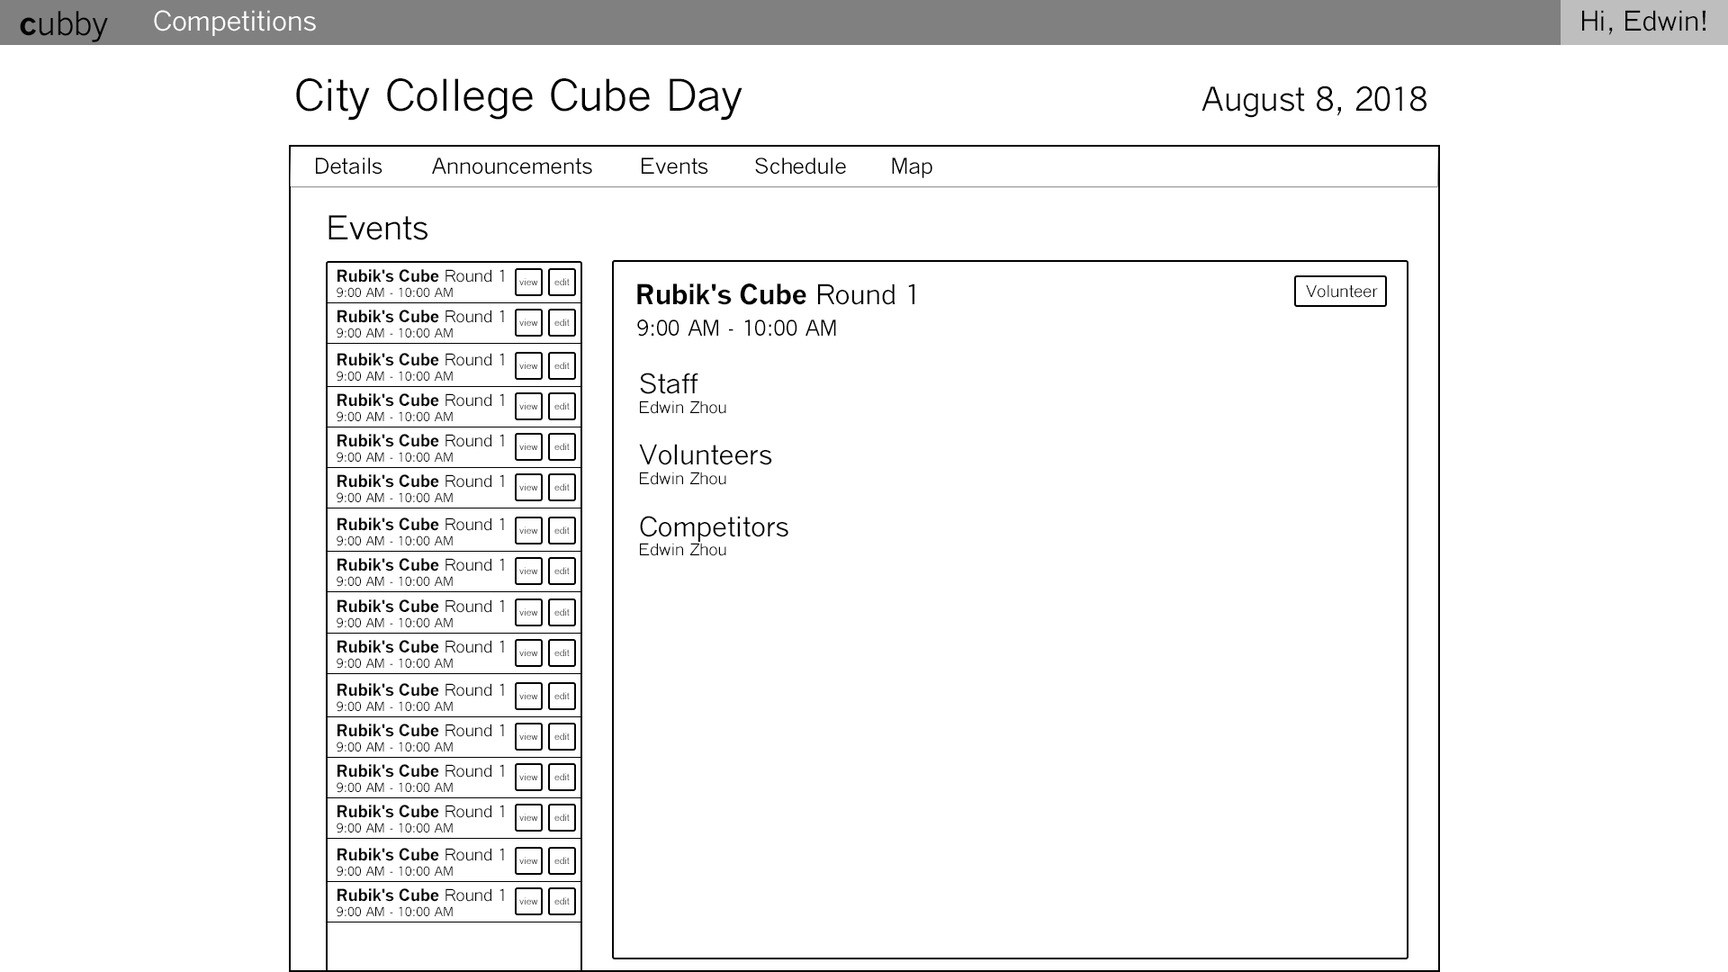
<style>
.page{position:relative;width:1728px;height:972px;background:#ffffff}
.page>*{position:absolute;margin:0}
.t1{font:32.4px "QuickTypeII";color:#000000}
.t2{font:32.4px "QuickTypeII-Bold";color:#000000}
.t3{font:27px "QuickTypeII";color:#ffffff}
.t4{font:27px "QuickTypeII";color:#000000}
.t5{font:43.2px "QuickTypeII";color:#000000}
.t6{font:21.6px "QuickTypeII";color:#000000}
.t7{font:12.6px "QuickTypeII";color:#000000}
.t8{font:16.2px "QuickTypeII-Bold";color:#000000}
.t9{font:16.2px "QuickTypeII";color:#000000}
.t10{font:9px "QuickTypeII"}
.t11{font:27px "QuickTypeII-Bold";color:#000000}
</style>
<div class="page">
<p class="t1" style="left:20px;top:11px;width:88px;height:31px"><span class="t2">c</span>ubby</p>
<p class="t3" style="left:154px;top:10px;width:162px;height:26px">Competitions</p>
<p class="t4" style="left:1582px;top:10px;width:124px;height:25px">Hi, Edwin!</p>
<p class="t5" style="left:296px;top:78px;width:446px;height:43px">City College Cube Day</p>
<p class="t1" style="left:1202px;top:86px;width:224px;height:32px">August 8, 2018</p>
<p class="t6" style="left:316px;top:158px;width:66px;height:17px">Details</p>
<p class="t6" style="left:432px;top:158px;width:160px;height:17px">Announcements</p>
<p class="t6" style="left:642px;top:158px;width:66px;height:17px">Events</p>
<p class="t6" style="left:755px;top:158px;width:91px;height:17px">Schedule</p>
<p class="t6" style="left:892px;top:158px;width:40px;height:20px">Map</p>
<p class="t1" style="left:328px;top:215px;width:100px;height:25px">Events</p>
<p class="t7" style="left:337px;top:269px;width:167px;height:29px"><span class="t8">Rubik's Cube</span><span class="t9"> Round 1<br></span>9:00 AM - 10:00 AM</p>
<p class="t10" style="left:519px;top:278px;width:19px;height:7px">view</p>
<p class="t10" style="left:554px;top:278px;width:16px;height:7px">edit</p>
<p class="t11" style="left:637px;top:284px;width:277px;height:21px">Rubik's Cube<span class="t4"> Round 1</span></p>
<p class="t9" style="left:1306px;top:284px;width:72px;height:14px">Volunteer</p>
<p class="t7" style="left:337px;top:310px;width:167px;height:28px"><span class="t8">Rubik's Cube</span><span class="t9"> Round 1<br></span>9:00 AM - 10:00 AM</p>
<p class="t10" style="left:519px;top:319px;width:19px;height:7px">view</p>
<p class="t10" style="left:554px;top:319px;width:16px;height:7px">edit</p>
<p class="t6" style="left:637px;top:320px;width:199px;height:17px">9:00 AM - 10:00 AM</p>
<p class="t7" style="left:337px;top:353px;width:167px;height:29px"><span class="t8">Rubik's Cube</span><span class="t9"> Round 1<br></span>9:00 AM - 10:00 AM</p>
<p class="t10" style="left:519px;top:362px;width:19px;height:7px">view</p>
<p class="t10" style="left:554px;top:362px;width:16px;height:7px">edit</p>
<p class="t4" style="left:639px;top:373px;width:149px;height:183px">Staff <br><span class="t9">Edwin Zhou<br><br></span>Volunteers<br><span class="t9">Edwin Zhou<br><br></span>Competitors<br><span class="t9">Edwin Zhou</span></p>
<p class="t7" style="left:337px;top:393px;width:167px;height:29px"><span class="t8">Rubik's Cube</span><span class="t9"> Round 1<br></span>9:00 AM - 10:00 AM</p>
<p class="t10" style="left:519px;top:402px;width:19px;height:8px">view</p>
<p class="t10" style="left:554px;top:402px;width:16px;height:8px">edit</p>
<p class="t7" style="left:337px;top:434px;width:167px;height:29px"><span class="t8">Rubik's Cube</span><span class="t9"> Round 1<br></span>9:00 AM - 10:00 AM</p>
<p class="t10" style="left:519px;top:443px;width:19px;height:7px">view</p>
<p class="t10" style="left:554px;top:443px;width:16px;height:7px">edit</p>
<p class="t7" style="left:337px;top:474px;width:167px;height:29px"><span class="t8">Rubik's Cube</span><span class="t9"> Round 1<br></span>9:00 AM - 10:00 AM</p>
<p class="t10" style="left:519px;top:483px;width:19px;height:7px">view</p>
<p class="t10" style="left:554px;top:483px;width:16px;height:7px">edit</p>
<p class="t7" style="left:337px;top:518px;width:167px;height:28px"><span class="t8">Rubik's Cube</span><span class="t9"> Round 1<br></span>9:00 AM - 10:00 AM</p>
<p class="t10" style="left:519px;top:526px;width:19px;height:8px">view</p>
<p class="t10" style="left:554px;top:526px;width:16px;height:8px">edit</p>
<p class="t7" style="left:337px;top:558px;width:167px;height:29px"><span class="t8">Rubik's Cube</span><span class="t9"> Round 1<br></span>9:00 AM - 10:00 AM</p>
<p class="t10" style="left:519px;top:567px;width:19px;height:7px">view</p>
<p class="t10" style="left:554px;top:567px;width:16px;height:7px">edit</p>
<p class="t7" style="left:337px;top:599px;width:167px;height:29px"><span class="t8">Rubik's Cube</span><span class="t9"> Round 1<br></span>9:00 AM - 10:00 AM</p>
<p class="t10" style="left:519px;top:608px;width:19px;height:8px">view</p>
<p class="t10" style="left:554px;top:608px;width:16px;height:8px">edit</p>
<p class="t7" style="left:337px;top:640px;width:167px;height:29px"><span class="t8">Rubik's Cube</span><span class="t9"> Round 1<br></span>9:00 AM - 10:00 AM</p>
<p class="t10" style="left:519px;top:649px;width:19px;height:7px">view</p>
<p class="t10" style="left:554px;top:649px;width:16px;height:7px">edit</p>
<p class="t7" style="left:337px;top:683px;width:167px;height:29px"><span class="t8">Rubik's Cube</span><span class="t9"> Round 1<br></span>9:00 AM - 10:00 AM</p>
<p class="t10" style="left:519px;top:692px;width:19px;height:7px">view</p>
<p class="t10" style="left:554px;top:692px;width:16px;height:7px">edit</p>
<p class="t7" style="left:337px;top:724px;width:167px;height:28px"><span class="t8">Rubik's Cube</span><span class="t9"> Round 1<br></span>9:00 AM - 10:00 AM</p>
<p class="t10" style="left:519px;top:733px;width:19px;height:7px">view</p>
<p class="t10" style="left:554px;top:733px;width:16px;height:7px">edit</p>
<p class="t7" style="left:337px;top:764px;width:167px;height:29px"><span class="t8">Rubik's Cube</span><span class="t9"> Round 1<br></span>9:00 AM - 10:00 AM</p>
<p class="t10" style="left:519px;top:773px;width:19px;height:7px">view</p>
<p class="t10" style="left:554px;top:773px;width:16px;height:7px">edit</p>
<p class="t7" style="left:337px;top:805px;width:167px;height:28px"><span class="t8">Rubik's Cube</span><span class="t9"> Round 1<br></span>9:00 AM - 10:00 AM</p>
<p class="t10" style="left:519px;top:814px;width:19px;height:7px">view</p>
<p class="t10" style="left:554px;top:814px;width:16px;height:7px">edit</p>
<p class="t7" style="left:337px;top:848px;width:167px;height:29px"><span class="t8">Rubik's Cube</span><span class="t9"> Round 1<br></span>9:00 AM - 10:00 AM</p>
<p class="t10" style="left:519px;top:857px;width:19px;height:7px">view</p>
<p class="t10" style="left:554px;top:857px;width:16px;height:7px">edit</p>
<p class="t7" style="left:337px;top:888px;width:167px;height:29px"><span class="t8">Rubik's Cube</span><span class="t9"> Round 1<br></span>9:00 AM - 10:00 AM</p>
<p class="t10" style="left:519px;top:897px;width:19px;height:7px">view</p>
<p class="t10" style="left:554px;top:897px;width:16px;height:7px">edit</p>
</div>
